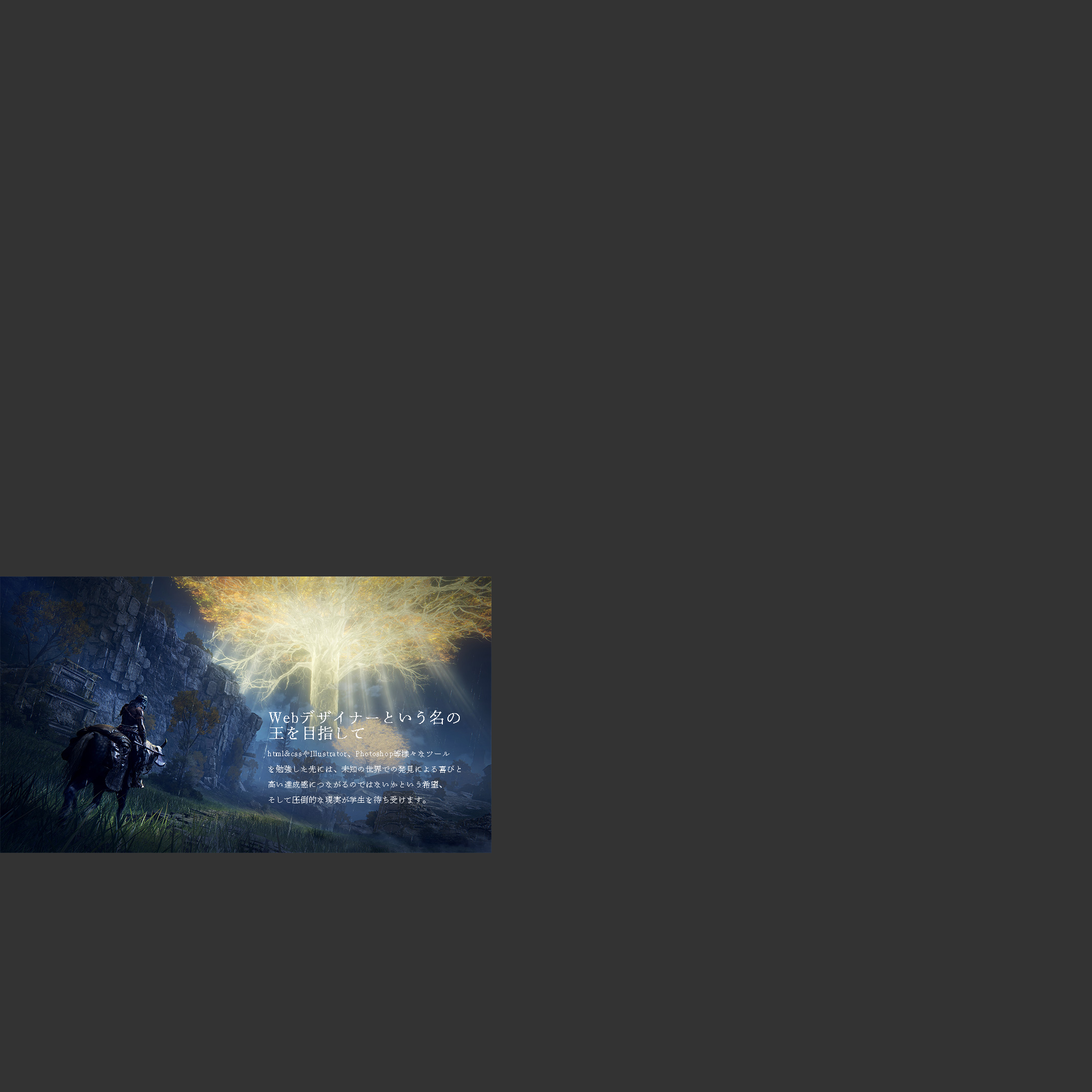
<style>
.page{position:relative;width:1092px;height:1092px;background:#333333}
.page>*{position:absolute;margin:0}
.t1{font:15.4px/15.4px "DNPShueiNMinStd-L";letter-spacing:0.06em;color:#ffffff}
.t2{font:7.7px/15.4px "DNPShueiNMinStd-L";letter-spacing:0.06em;color:#ffffff}
</style>
<div class="page">
<p class="t1" style="left:269px;top:710px;width:191px;height:30px">Webデザイナーという名の<br>王を目指して</p>
<p class="t2" style="left:268px;top:750px;width:193px;height:54px">html&amp;cssやIllustrator、Photoshop等様々なツール<br>を勉強した先には、未知の世界での発見による喜びと<br>高い達成感につながるのではないかという希望、<br>そして圧倒的な現実が学生を待ち受けます。</p>
</div>
